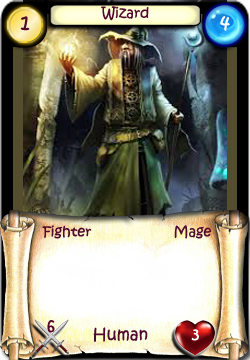
<style>
.page{position:relative;width:250px;height:360px}
.page>*{position:absolute;margin:0}
.t1{font:14px "KristenITC-Regular";color:#51092d}
.t2{font:20px "KristenITC-Regular";color:#51092d}
.t3{font:20px "KristenITC-Regular";color:#ffffff}
.t4{font:16px "KristenITC-Regular";color:#51092d}
.t5{font:16px "KristenITC-Regular";color:#fefefe}
</style>
<div class="page">
<p class="t1" style="left:101px;top:6px;width:48px;height:15px">Wizard</p>
<p class="t2" style="left:20px;top:16px;width:10px;height:15px">1</p>
<p class="t3" style="left:220px;top:16px;width:10px;height:15px">4</p>
<p class="t1" style="left:42px;top:225px;width:50px;height:14px">Fighter</p>
<p class="t1" style="left:174px;top:225px;width:38px;height:14px">Mage</p>
<p class="t4" style="left:47px;top:320px;width:8px;height:13px">6</p>
<p class="t4" style="left:93px;top:327px;width:55px;height:15px">Human</p>
<p class="t5" style="left:191px;top:329px;width:8px;height:12px">3</p>
</div>
